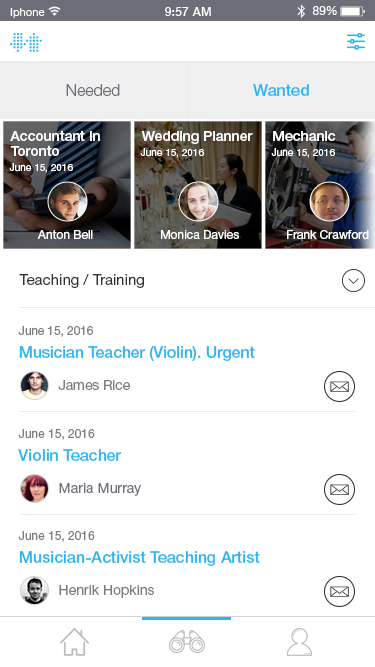
<style>
.page{position:relative;width:375px;height:667px;background:#ffffff}
.page>*{position:absolute;margin:0}
.t1{font:16px "HelveticaNeueCyr-Light";color:#6c6f78}
.t2{font:16px "HelveticaNeueCyr-Medium";color:#29b6f6}
.t3{font:14px/15px "HelveticaNeueCyr-Medium";color:#ffffff}
.t4{font:14px "HelveticaNeueCyr-Medium";color:#ffffff}
.t5{font:10px "HelveticaNeueCyr-Roman";color:#ffffff}
.t6{font:12px "HelveticaNeueCyr-Roman";color:#ffffff}
.t7{font:15px "HelveticaNeueCyr-Roman";color:#343433}
.t8{font:12px "HelveticaNeueCyr-Roman";letter-spacing:-0.01em;color:#7d7d7d}
.t9{font:16px "HelveticaNeueCyr-Medium";letter-spacing:-0.01em;color:#29b6f6}
.t10{font:14px "HelveticaNeueCyr-Roman";letter-spacing:-0.01em;color:#7d7d7d}
.t11{font:12px "HelveticaNeueCyr-Roman";color:#7d7d7d}
.t12{font:14px "HelveticaNeueCyr-Roman";color:#6c6f78}
.t13{font:14px "HelveticaNeueCyr-Roman";color:#7d7d7d}
</style>
<div class="page">
<p class="t1" style="left:66px;top:84px;width:54px;height:12px">Needed</p>
<p class="t2" style="left:253px;top:84px;width:56px;height:12px">Wanted</p>
<p class="t3" style="left:10px;top:130px;width:90px;height:26px">Accountant in <br>Toronto</p>
<p class="t4" style="left:141px;top:131px;width:112px;height:13px">Wedding Planner</p>
<p class="t4" style="left:273px;top:131px;width:63px;height:10px">Mechanic</p>
<p class="t5" style="left:140px;top:148px;width:64px;height:10px">June 15, 2016</p>
<p class="t5" style="left:271px;top:148px;width:64px;height:10px">June 15, 2016</p>
<p class="t5" style="left:9px;top:163px;width:64px;height:10px">June 15, 2016</p>
<p class="t6" style="left:37px;top:230px;width:56px;height:9px">Anton Bell</p>
<p class="t6" style="left:161px;top:230px;width:78px;height:9px">Monica Davies</p>
<p class="t6" style="left:287px;top:230px;width:82px;height:10px">Frank Crawford</p>
<p class="t7" style="left:19px;top:274px;width:125px;height:14px">Teaching / Training</p>
<p class="t8" style="left:18px;top:326px;width:75px;height:11px">June 15, 2016</p>
<p class="t9" style="left:19px;top:346px;width:236px;height:15px">Musician Teacher (Violin). Urgent</p>
<p class="t10" style="left:58px;top:380px;width:72px;height:10px">James Rice</p>
<p class="t11" style="left:18px;top:429px;width:77px;height:11px">June 15, 2016</p>
<p class="t2" style="left:18px;top:449px;width:104px;height:12px">Violin Teacher</p>
<p class="t12" style="left:59px;top:483px;width:82px;height:13px">Maria Murray</p>
<p class="t11" style="left:18px;top:531px;width:77px;height:11px">June 15, 2016</p>
<p class="t2" style="left:19px;top:551px;width:241px;height:15px">Musician-Activist Teaching Artist</p>
<p class="t13" style="left:59px;top:585px;width:95px;height:13px">Henrik Hopkins</p>
</div>
